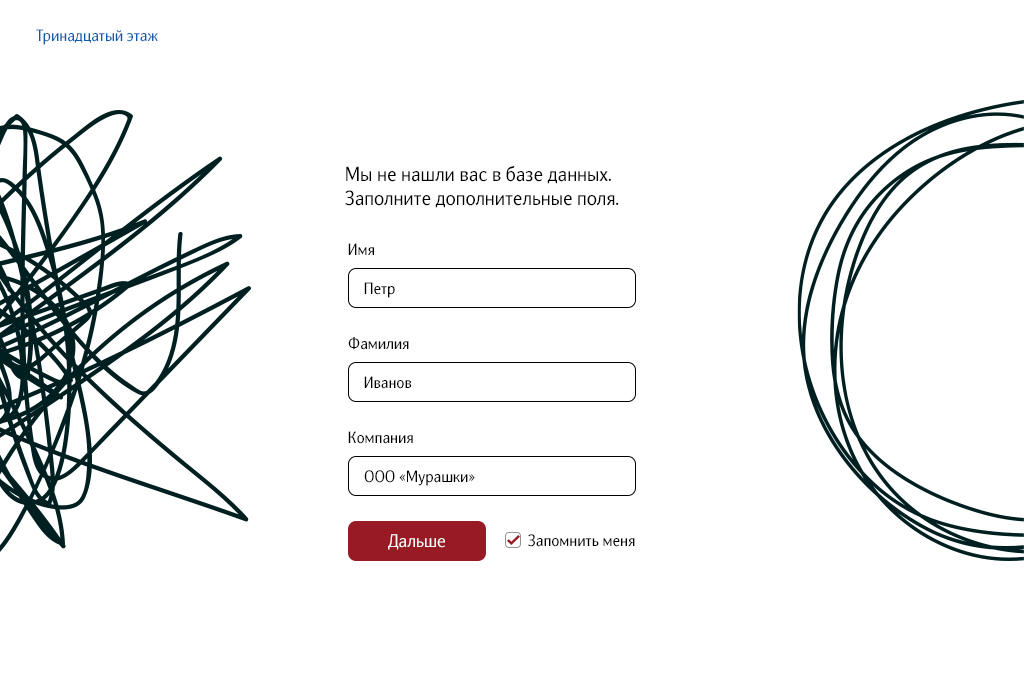
<style>
.page{position:relative;width:1024px;height:700px;background:#ffffff}
.page>*{position:absolute;margin:0}
.t1{font:16px "NatGrotesk-Regular";color:#0b5cae}
.t2{font:20px "NatGrotesk-Regular";color:#000000}
.t3{font:16px "NatGrotesk-Regular";color:#000000}
.t4{font:18px "NatGrotesk-Regular";color:#ffffff}
</style>
<div class="page">
<p class="t1" style="left:36px;top:29px;width:122px;height:16px">Тринадцатый этаж</p>
<p class="t2" style="left:345px;top:165px;width:274px;height:43px">Мы не нашли вас в базе данных. <br>Заполните дополнительные поля.</p>
<p class="t3" style="left:348px;top:243px;width:26px;height:12px">Имя</p>
<p class="t3" style="left:364px;top:282px;width:31px;height:16px">Петр</p>
<p class="t3" style="left:348px;top:337px;width:61px;height:13px">Фамилия</p>
<p class="t3" style="left:364px;top:376px;width:48px;height:13px">Иванов</p>
<p class="t3" style="left:348px;top:431px;width:65px;height:13px">Компания</p>
<p class="t3" style="left:364px;top:470px;width:111px;height:16px">ООО «Мурашки»</p>
<p class="t4" style="left:388px;top:534px;width:57px;height:16px">Дальше</p>
<p class="t3" style="left:528px;top:534px;width:107px;height:13px">Запомнить меня</p>
</div>
